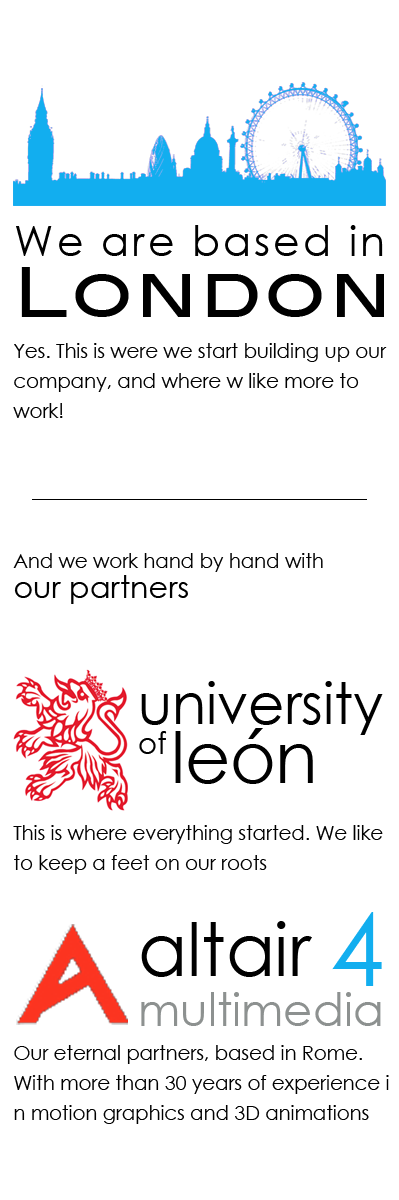
<style>
.page{position:relative;width:399px;height:1200px;background:#ffffff}
.page>*{position:absolute;margin:0}
.t1{font:42px "CenturyGothic";letter-spacing:0.075em;color:#000000}
.t2{font:67px/30px "BlairMdITCTTMedium";letter-spacing:0.05em;color:#000000}
.t3{font:20px/30px "CenturyGothic";color:#000000}
.t4{font:31px/30px "CenturyGothic";color:#000000}
.t5{font:57px/10px "CenturyGothic";color:#000000}
.t6{font:30px/10px "CenturyGothic";color:#000000}
.t7{font:71px "CenturyGothic";color:#000000}
.t8{font:100px "CenturyGothic";color:#12aeef}
.t9{font:46px/10px "CenturyGothic";color:#8d9190}
.t10{font:73px/10px "CenturyGothic";color:#000000}
</style>
<div class="page">
<p class="t1" style="left:16px;top:225px;width:368px;height:92px">We are based in<br><br><span class="t2">London</span></p>
<p class="t3" style="left:13px;top:343px;width:374px;height:261px">Yes. This is were we start building up our<br>company, and where w like more to <br>work!<br><br><br><br><br>And we work hand by hand with <br><span class="t4">our partners</span></p>
<p class="t5" style="left:139px;top:681px;width:244px;height:73px">university<br><br><br><span class="t6">of</span></p>
<p class="t7" style="left:175px;top:728px;width:138px;height:56px">león</p>
<p class="t3" style="left:13px;top:825px;width:370px;height:49px">This is where everything started. We like<br>to keep a feet on our roots</p>
<p class="t8" style="left:332px;top:912px;width:50px;height:74px">4</p>
<p class="t9" style="left:141px;top:921px;width:240px;height:105px"><span class="t10">altair<br><br><br><br><br></span>multimedia</p>
<p class="t3" style="left:14px;top:1045px;width:375px;height:79px">Our eternal partners, based in Rome.<br>With more than 30 years of experience i<br>n motion graphics and 3D animations</p>
</div>
